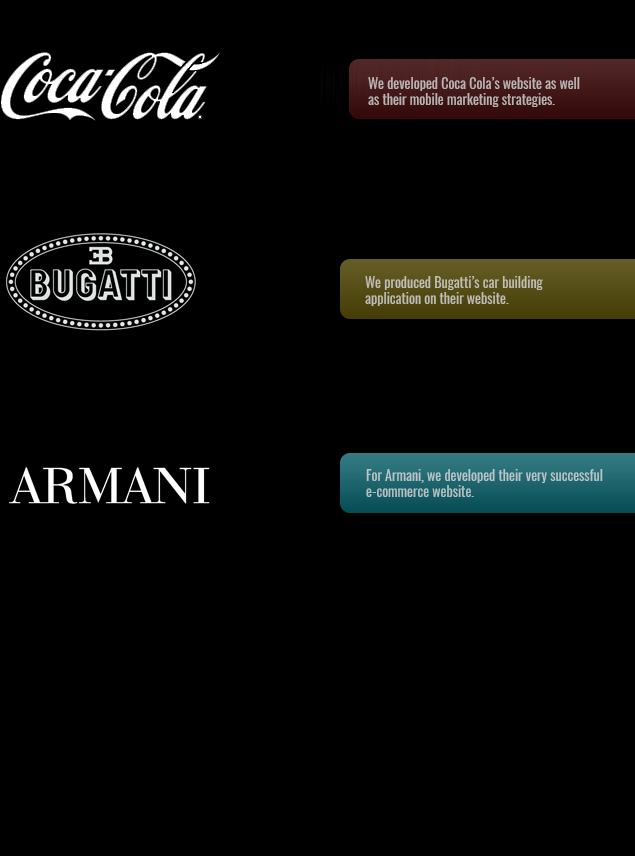
<style>
.page{position:relative;width:635px;height:856px;background:#000000}
.page>*{position:absolute;margin:0}
.t1{font:15.4px/16px "Oswald-Regular";color:#bcb3b3;scale:0.91 1}
.t2{font:15.4px/16px "Oswald-Regular";color:#c0beb3;scale:0.91 1}
.t3{font:15.4px/16px "Oswald-Regular";color:#b5c6c9;scale:0.91 1}
</style>
<div class="page">
<p class="t1" style="left:368px;top:77px;width:212px;height:30px">We developed Coca Cola’s website as well<br>as their mobile marketing strategies.</p>
<p class="t2" style="left:365px;top:276px;width:178px;height:30px">We produced Bugatti’s car building <br>application on their website.</p>
<p class="t3" style="left:366px;top:469px;width:237px;height:28px">For Armani, we developed their very successful e-commerce website.</p>
</div>
